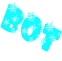
<style>
.page{position:relative;width:62px;height:61px;background:#ffffff}
.page>*{position:absolute;margin:0}
.t1{font:40.1px "winterflakes";color:#0ffcff;scale:0.93 1}
</style>
<div class="page">
<p class="t1" style="left:0px;top:2px;width:62px;height:50px;rotate:28deg">BOT</p>
</div>
